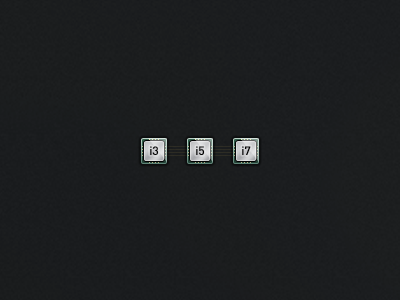
<style>
.page{position:relative;width:400px;height:300px}
.page>*{position:absolute;margin:0}
.t1{font:12px "DIN-Medium";color:#000000}
.t2{font:12px "DIN-Medium";color:#000000;font-variant:small-caps}
</style>
<div class="page">
<p class="t1" style="left:150px;top:146px;width:8px;height:9px">i3</p>
<p class="t1" style="left:196px;top:146px;width:8px;height:9px">i5</p>
<p class="t1" style="left:242px;top:146px;width:9px;height:9px">i<span class="t2">7</span></p>
</div>
